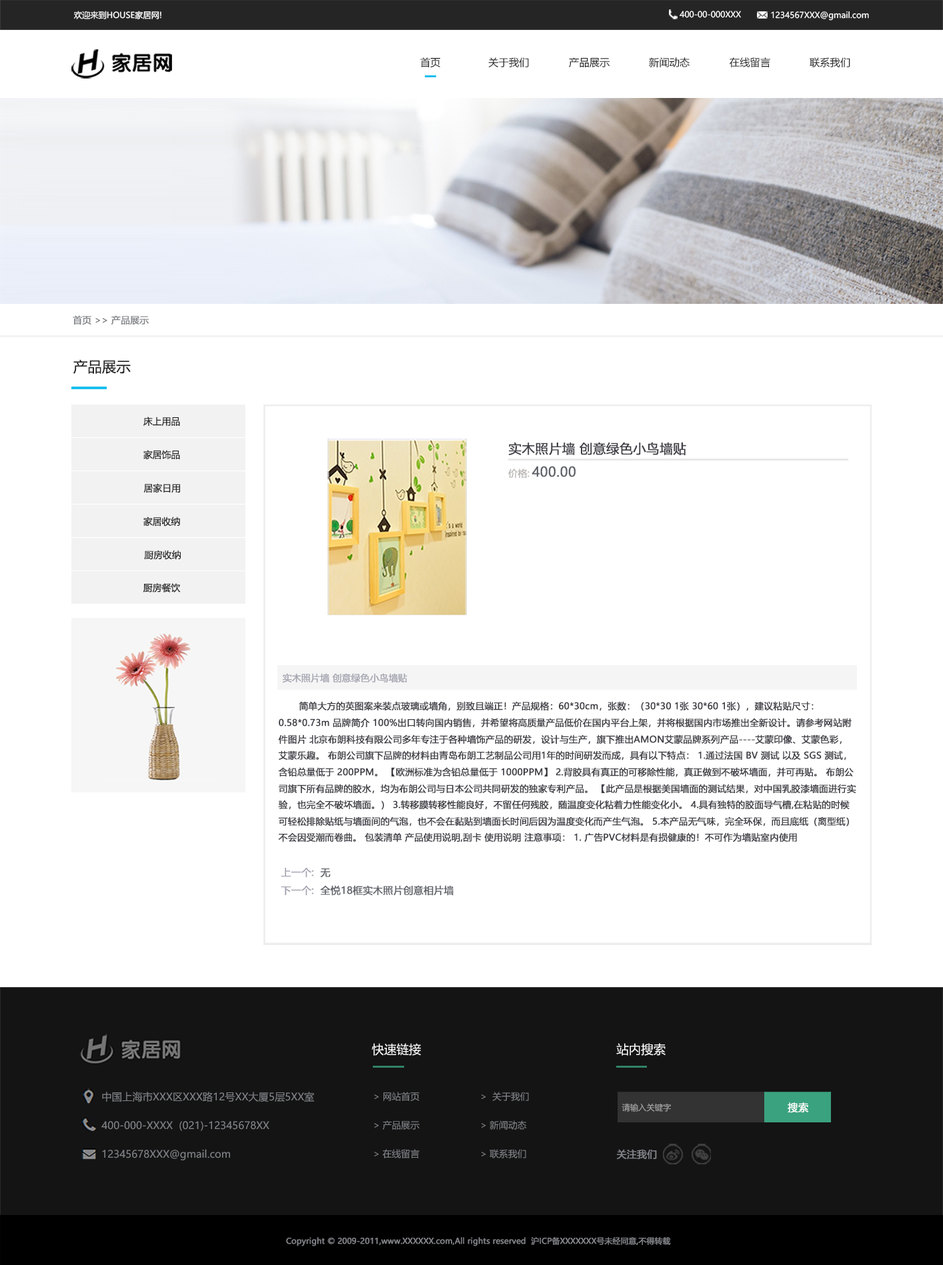
<style>
.page{position:relative;width:943px;height:1265px;background:#ffffff}
.page>*{position:absolute;margin:0}
.t1{font:8.2px "MicrosoftYaHei";color:#ffffff}
.t2{font:10.2px "MicrosoftYaHei";color:#252525}
.t3{font:9.1px "MicrosoftYaHei";color:#818388;font-weight:bold}
.t4{font:14.3px "MicrosoftYaHei";color:#252525}
.t5{font:9.2px "MicrosoftYaHei";color:#252525}
.t6{font:13px "MicrosoftYaHei";color:#3f3e45;font-weight:bold}
.t7{font:9.3px "MicrosoftYaHei";color:#bbb8b5;font-weight:bold}
.t8{font:13.3px "MicrosoftYaHei";color:#606369;font-weight:bold}
.t9{font:9.1px "MicrosoftYaHei";color:#a5a5b1;font-weight:bold}
.t10{font:9px/16.4px "MicrosoftYaHei";color:#3f3e45;font-weight:bold}
.t11{font:9.8px/18.5px "MicrosoftYaHei";color:#606369;font-weight:bold}
.t12{font:9.8px/18.5px "MicrosoftYaHei";color:#a5a5b1;font-weight:bold}
.t13{font:12.3px "MicrosoftYaHei";color:#ffffff}
.t14{font:10.2px "MicrosoftYaHei";color:#818388}
.t15{font:9.2px/28.6px "MicrosoftYaHei";color:#818388}
.t16{font:8.2px "MicrosoftYaHei";color:#adadad}
.t17{font:10.2px "MicrosoftYaHei";color:#ffffff;font-weight:bold}
.t18{font:9.8px "MicrosoftYaHei";color:#818388;font-weight:bold}
.t19{font:7.8px "MicrosoftYaHei";color:#818388;font-weight:bold}
</style>
<div class="page">
<p class="t1" style="left:73px;top:11px;width:88px;height:8px">欢迎来到HOUSE家居网!</p>
<p class="t1" style="left:679px;top:11px;width:62px;height:7px">400-00-000XXX</p>
<p class="t1" style="left:771px;top:11px;width:98px;height:10px">1234567XXX@gmail.com</p>
<p class="t2" style="left:420px;top:57px;width:21px;height:11px">首页</p>
<p class="t2" style="left:488px;top:57px;width:41px;height:10px">关于我们</p>
<p class="t2" style="left:569px;top:57px;width:40px;height:11px">产品展示</p>
<p class="t2" style="left:649px;top:57px;width:40px;height:11px">新闻动态</p>
<p class="t2" style="left:729px;top:57px;width:41px;height:11px">在线留言</p>
<p class="t2" style="left:809px;top:57px;width:41px;height:11px">联系我们</p>
<p class="t3" style="left:73px;top:315px;width:76px;height:10px">首页 &gt;&gt; 产品展示</p>
<p class="t4" style="left:73px;top:359px;width:58px;height:15px">产品展示</p>
<p class="t5" style="left:143px;top:417px;width:37px;height:9px">床上用品</p>
<p class="t5" style="left:143px;top:450px;width:37px;height:9px">家居饰品</p>
<p class="t6" style="left:508px;top:442px;width:178px;height:13px">实木照片墙 创意绿色小鸟墙贴</p>
<p class="t7" style="left:508px;top:469px;width:21px;height:10px">价格:</p>
<p class="t8" style="left:531px;top:466px;width:44px;height:11px">400.00</p>
<p class="t5" style="left:143px;top:483px;width:37px;height:10px">居家日用</p>
<p class="t5" style="left:143px;top:517px;width:37px;height:10px">家居收纳</p>
<p class="t5" style="left:144px;top:550px;width:37px;height:10px">厨房收纳</p>
<p class="t5" style="left:143px;top:583px;width:38px;height:10px">厨房餐饮</p>
<p class="t9" style="left:282px;top:673px;width:125px;height:10px">实木照片墙 创意绿色小鸟墙贴</p>
<p class="t10" style="left:278px;top:701px;width:578px;height:142px">简单大方的英图案来装点玻璃或墙角，别致且端正！产品规格：60*30cm，张数：（30*30 1张 30*60 1张），建议粘贴尺寸：0.58*0.73m 品牌简介 100%出口转向国内销售，并希望将高质量产品低价在国内平台上架，并将根据国内市场推出全新设计。请参考网站附件图片 北京布朗科技有限公司多年专注于各种墙饰产品的研发，设计与生产，旗下推出AMON艾蒙品牌系列产品----艾蒙印像、艾蒙色彩，艾蒙乐趣。 布朗公司旗下品牌的材料由青岛布朗工艺制品公司用1年的时间研发而成，具有以下特点： 1.通过法国 BV 测试 以及 SGS 测试，含铅总量低于 200PPM。 【欧洲标准为含铅总量低于 1000PPM】 2.背胶具有真正的可移除性能，真正做到不破坏墙面，并可再贴。 布朗公司旗下所有品牌的胶水，均为布朗公司与日本公司共同研发的独家专利产品。 【此产品是根据美国墙面的测试结果，对中国乳胶漆墙面进行实验，也完全不破坏墙面。） 3.转移膜转移性能良好，不留任何残胶，随温度变化粘着力性能变化小。 4.具有独特的胶面导气槽,在粘贴的时候可轻松排除贴纸与墙面间的气泡，也不会在黏贴到墙面长时间后因为温度变化而产生气泡。 5.本产品无气味，完全环保，而且底纸（离型纸）不会因受潮而卷曲。 包装清单 产品使用说明,刮卡 使用说明 注意事项： 1. 广告PVC材料是有损健康的！不可作为墙贴室内使用</p>
<p class="t11" style="left:281px;top:868px;width:173px;height:28px"><span class="t12">上一个:  </span>无<br><span class="t12">下一个:  </span>全悦18框实木照片创意相片墙</p>
<p class="t13" style="left:371px;top:1043px;width:50px;height:13px">快速链接</p>
<p class="t13" style="left:616px;top:1043px;width:49px;height:13px">站内搜索</p>
<p class="t14" style="left:102px;top:1092px;width:212px;height:10px">中国上海市XXX区XXX路12号XX大厦5层5XX室</p>
<p class="t15" style="left:374px;top:1092px;width:45px;height:66px">&gt; 网站首页<br>&gt; 产品展示<br>&gt; 在线留言</p>
<p class="t15" style="left:481px;top:1092px;width:48px;height:66px">&gt;  关于我们<br>&gt; 新闻动态<br>&gt; 联系我们</p>
<p class="t16" style="left:621px;top:1103px;width:50px;height:9px">请输入关键字</p>
<p class="t17" style="left:787px;top:1103px;width:22px;height:10px">搜索</p>
<p class="t14" style="left:101px;top:1121px;width:168px;height:10px">400-000-XXXX  (021)-12345678XX</p>
<p class="t14" style="left:102px;top:1149px;width:128px;height:11px">12345678XXX@gmail.com</p>
<p class="t18" style="left:617px;top:1149px;width:40px;height:11px">关注我们</p>
<p class="t19" style="left:286px;top:1237px;width:385px;height:9px">Copyright © 2009-2011,www.XXXXXX.com,All rights reserved  沪ICP备XXXXXXX号未经同意,不得转载</p>
</div>
